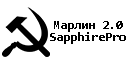
<style>
.page{position:relative;width:128px;height:64px;background:#ffffff}
.page>*{position:absolute;margin:0}
.t1{font:12.5px "Consolas-Bold";color:#000000}
</style>
<div class="page">
<p class="t1" style="left:54px;top:21px;width:69px;height:11px">Марлин 2.0</p>
<p class="t1" style="left:50px;top:32px;width:76px;height:12px">SapphirePro</p>
</div>
